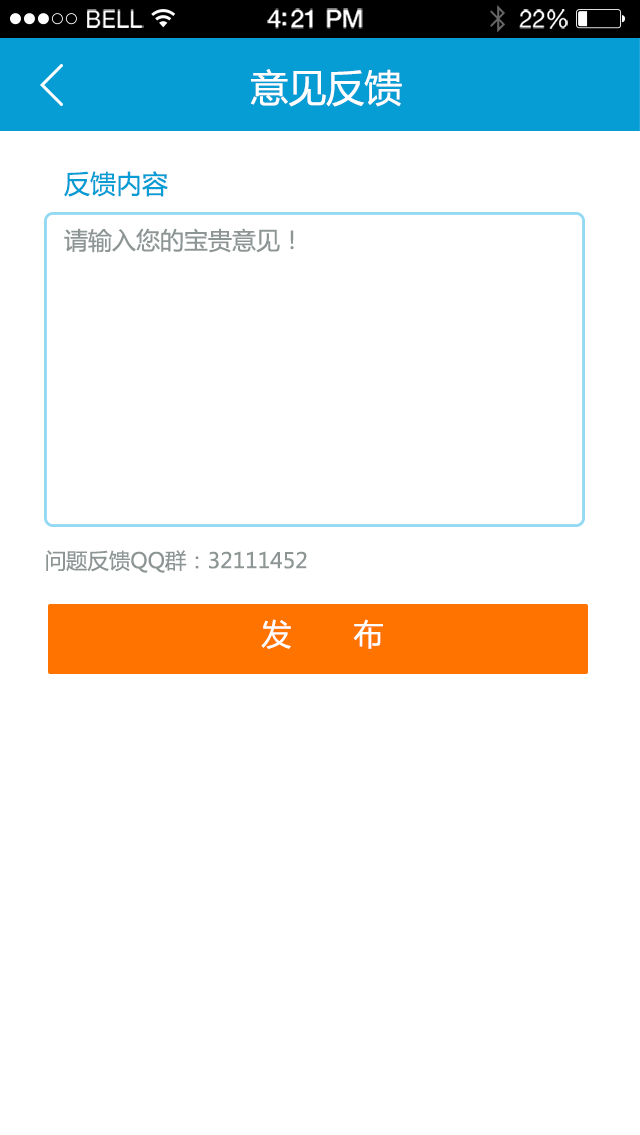
<style>
.page{position:relative;width:640px;height:1135px;background:#ffffff}
.page>*{position:absolute;margin:0}
.t1{font:23.1px "HelveticaNeue";letter-spacing:0.02em;color:#ffffff}
.t2{font:25.1px "HelveticaNeue-Medium";letter-spacing:-0.02em;color:#ffffff}
.t3{font:24.1px "HelveticaNeue";letter-spacing:-0.02em;color:#ffffff}
.t4{font:38px "MicrosoftYaHei";color:#ffffff}
.t5{font:33.8px "MicrosoftYaHei";color:#ffffff}
.t6{font:24px/4px "MicrosoftYaHei";color:#8d9695}
.t7{font:26px/4px "MicrosoftYaHei";color:#069dd4}
.t8{font:21.3px "MicrosoftYaHei";color:#8d9695}
.t9{font:30px "MicrosoftYaHei";color:#ffffff}
</style>
<div class="page">
<p class="t1" style="left:87px;top:9px;width:57px;height:19px">BELL</p>
<p class="t2" style="left:267px;top:8px;width:96px;height:21px">4:21 PM</p>
<p class="t3" style="left:519px;top:9px;width:49px;height:20px">22%</p>
<p class="t4" style="left:250px;top:69px;width:152px;height:38px"><span class="t5">   </span>意见反馈</p>
<p class="t6" style="left:64px;top:171px;width:230px;height:82px"><span class="t7">反馈内容<br><br><br><br><br><br><br><br></span>请输入您的宝贵意见！</p>
<p class="t8" style="left:46px;top:550px;width:261px;height:23px">问题反馈QQ群：32111452</p>
<p class="t9" style="left:261px;top:619px;width:122px;height:30px">发       布</p>
</div>
